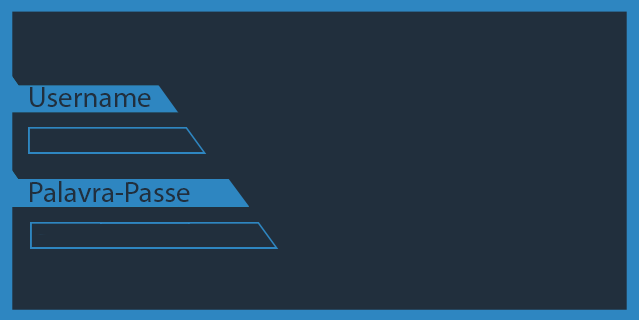
<style>
.page{position:relative;width:639px;height:320px;background:#212f3d}
.page>*{position:absolute;margin:0}
.t1{font:29.2px "MyriadPro-Regular";color:#212f3d}
</style>
<div class="page">
<p class="t1" style="left:30px;top:87px;width:121px;height:20px">Username</p>
<p class="t1" style="left:30px;top:181px;width:160px;height:21px">Palavra-Passe</p>
</div>
